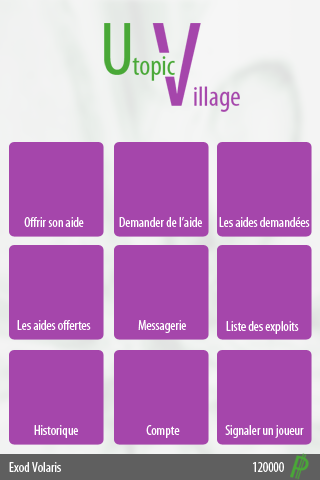
<style>
.page{position:relative;width:320px;height:480px;background:#a546ab}
.page>*{position:absolute;margin:0}
.t1{font:14px "MyriadPro-Cond";color:#ffffff}
</style>
<div class="page">
<p class="t1" style="left:24px;top:217px;width:60px;height:10px">Offrir son aide</p>
<p class="t1" style="left:119px;top:216px;width:83px;height:11px">Demander de l’aide</p>
<p class="t1" style="left:219px;top:217px;width:91px;height:10px">Les aides demandées</p>
<p class="t1" style="left:17px;top:320px;width:74px;height:10px">Les aides offertes</p>
<p class="t1" style="left:138px;top:320px;width:48px;height:13px">Messagerie</p>
<p class="t1" style="left:226px;top:321px;width:73px;height:13px">Liste des exploits</p>
<p class="t1" style="left:34px;top:425px;width:44px;height:13px">Historique</p>
<p class="t1" style="left:146px;top:425px;width:34px;height:13px">Compte</p>
<p class="t1" style="left:225px;top:425px;width:79px;height:13px">Signaler un joueur</p>
<p class="t1" style="left:9px;top:462px;width:52px;height:10px">Exod Volaris</p>
<p class="t1" style="left:253px;top:462px;width:31px;height:10px">120000</p>
</div>
